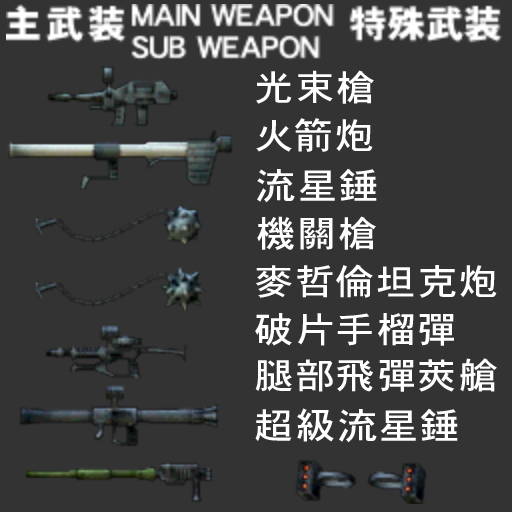
<style>
.page{position:relative;width:512px;height:512px;background:#333333}
.page>*{position:absolute;margin:0}
.t1{font:36px "HeiseiKakuGoStd-W5";letter-spacing:0.07em;color:#ffffff;scale:1.09 1}
</style>
<div class="page">
<p class="t1" style="left:256px;top:70px;width:118px;height:34px">光束槍</p>
<p class="t1" style="left:256px;top:118px;width:117px;height:34px">火箭炮</p>
<p class="t1" style="left:257px;top:168px;width:120px;height:35px">流星錘</p>
<p class="t1" style="left:257px;top:216px;width:119px;height:34px">機關槍</p>
<p class="t1" style="left:256px;top:264px;width:241px;height:34px">麥哲倫坦克炮</p>
<p class="t1" style="left:255px;top:313px;width:199px;height:33px">破片手榴彈</p>
<p class="t1" style="left:255px;top:358px;width:242px;height:34px">腿部飛彈莢艙</p>
<p class="t1" style="left:255px;top:408px;width:203px;height:35px">超級流星錘</p>
</div>
